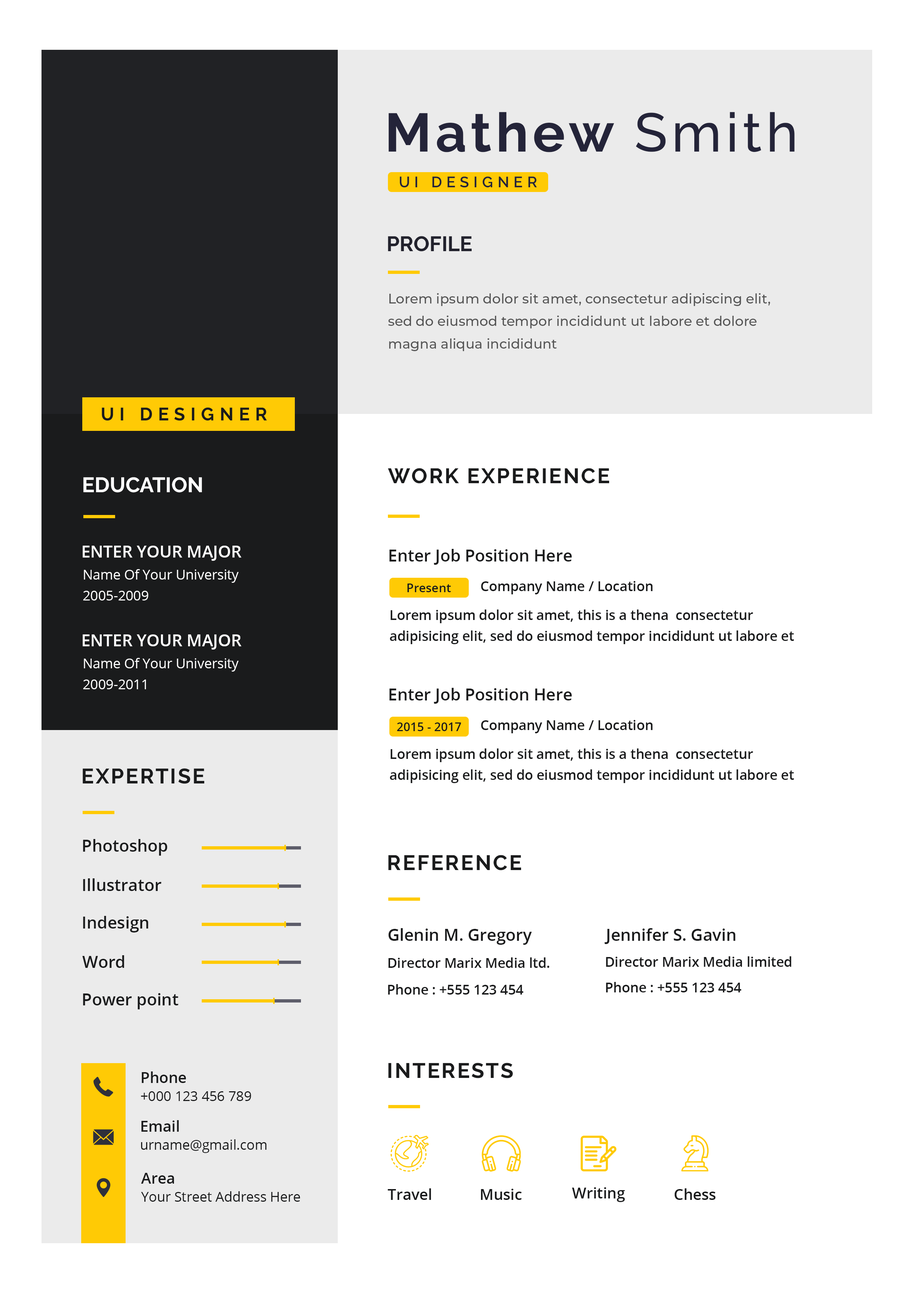
<style>
.page{position:relative;width:922px;height:1293px;background:#ffffff}
.page>*{position:absolute;margin:0}
.t1{font:54.1px "Raleway-Bold";letter-spacing:0.08em;color:#242439}
.t2{font:54.1px "Raleway-Medium";letter-spacing:0.08em;color:#242439}
.t3{font:15px "Raleway-SemiBold";letter-spacing:0.3em;color:#242439;text-transform:uppercase}
.t4{font:21.1px "Raleway-Bold";color:#22222d;text-transform:uppercase}
.t5{font:13.5px/22.6px "Montserrat-Medium";color:#555555}
.t6{font:18px "Raleway-Bold";letter-spacing:0.3em;color:#1a1b1c;text-transform:uppercase}
.t7{font:21.1px "Raleway-Bold";letter-spacing:0.08em;color:#1a1b1c;text-transform:uppercase}
.t8{font:21.1px "Raleway-Bold";color:#ffffff;text-transform:uppercase}
.t9{font:16.5px "OpenSans-Semibold";color:#ffffff;text-transform:uppercase}
.t10{font:16.5px "OpenSans-Semibold";color:#1a1b1c}
.t11{font:13.5px/21.1px "OpenSans";color:#ffffff}
.t12{font:13.5px "OpenSans-Semibold";color:#1a1b1c}
.t13{font:12px "OpenSans-Semibold";color:#1a1b1c}
.t14{font:13.5px/21.1px "OpenSans-Semibold";color:#1a1b1c}
.t15{font:13.5px/18px "OpenSans";color:#1a1b1c}
.t16{font:15px/18px "OpenSans-Semibold";color:#1a1b1c;text-transform:uppercase}
.t17{font:15px/18px "OpenSans-Semibold";color:#1a1b1c}
.t18{font:15px "OpenSans-Semibold";color:#1a1b1c}
</style>
<div class="page">
<p class="t1" style="left:389px;top:112px;width:406px;height:40px">Mathew <span class="t2">Smith</span></p>
<p class="t3" style="left:400px;top:176px;width:137px;height:12px">UI Designer</p>
<p class="t4" style="left:388px;top:236px;width:84px;height:16px">Profile</p>
<p class="t5" style="left:388px;top:293px;width:382px;height:58px">Lorem ipsum dolor sit amet, consectetur adipiscing elit, sed do eiusmod tempor incididunt ut labore et dolore magna aliqua incididunt</p>
<p class="t6" style="left:102px;top:407px;width:165px;height:14px">UI Designer</p>
<p class="t7" style="left:388px;top:468px;width:221px;height:16px">work experience</p>
<p class="t8" style="left:83px;top:477px;width:119px;height:16px">education</p>
<p class="t9" style="left:83px;top:546px;width:158px;height:15px">Enter your major</p>
<p class="t10" style="left:389px;top:549px;width:183px;height:16px">Enter Job Position Here</p>
<p class="t11" style="left:83px;top:569px;width:156px;height:32px">Name Of Your University<br>2005-2009</p>
<p class="t12" style="left:481px;top:581px;width:172px;height:13px">Company Name / Location</p>
<p class="t13" style="left:407px;top:584px;width:44px;height:8px">Present</p>
<p class="t14" style="left:390px;top:610px;width:404px;height:34px">Lorem ipsum dolor sit amet, this is a thena  consectetur adipisicing elit, sed do eiusmod tempor incididunt ut labore et dolore</p>
<p class="t9" style="left:83px;top:634px;width:158px;height:16px">Enter your major</p>
<p class="t11" style="left:83px;top:658px;width:156px;height:31px">Name Of Your University<br>2009-2011</p>
<p class="t10" style="left:389px;top:688px;width:183px;height:16px">Enter Job Position Here</p>
<p class="t13" style="left:397px;top:723px;width:64px;height:8px">2015 - 2017</p>
<p class="t12" style="left:481px;top:720px;width:172px;height:13px">Company Name / Location</p>
<p class="t14" style="left:390px;top:749px;width:404px;height:34px">Lorem ipsum dolor sit amet, this is a thena  consectetur adipisicing elit, sed do eiusmod tempor incididunt ut labore et dolore</p>
<p class="t7" style="left:83px;top:768px;width:121px;height:16px">expertise</p>
<p class="t10" style="left:83px;top:839px;width:84px;height:17px">Photoshop</p>
<p class="t7" style="left:388px;top:855px;width:133px;height:16px">reference</p>
<p class="t10" style="left:83px;top:878px;width:78px;height:13px">Illustrator</p>
<p class="t10" style="left:83px;top:916px;width:65px;height:17px">Indesign</p>
<p class="t10" style="left:388px;top:928px;width:144px;height:17px">Glenin M. Gregory</p>
<p class="t10" style="left:605px;top:928px;width:131px;height:16px">Jennifer S. Gavin</p>
<p class="t10" style="left:82px;top:955px;width:42px;height:13px">Word</p>
<p class="t12" style="left:388px;top:957px;width:161px;height:11px">Director Marix Media ltd.</p>
<p class="t12" style="left:606px;top:956px;width:185px;height:11px">Director Marix Media limited</p>
<p class="t12" style="left:388px;top:984px;width:135px;height:11px">Phone : +555 123 454</p>
<p class="t12" style="left:606px;top:982px;width:135px;height:11px">Phone : +555 123 454</p>
<p class="t10" style="left:83px;top:993px;width:95px;height:16px">Power point</p>
<p class="t15" style="left:141px;top:1072px;width:110px;height:29px"><span class="t16">P</span><span class="t17">hone<br></span>+000 123 456 789</p>
<p class="t7" style="left:388px;top:1063px;width:125px;height:15px">interests</p>
<p class="t15" style="left:141px;top:1120px;width:126px;height:33px"><span class="t16">e</span><span class="t17">mail<br></span>urname@gmail.com</p>
<p class="t15" style="left:141px;top:1173px;width:159px;height:29px"><span class="t16">a</span><span class="t17">rea<br></span>Your Street Address Here</p>
<p class="t18" style="left:388px;top:1188px;width:43px;height:12px">Travel</p>
<p class="t18" style="left:481px;top:1189px;width:41px;height:11px">Music</p>
<p class="t18" style="left:572px;top:1187px;width:53px;height:15px">Writing</p>
<p class="t18" style="left:675px;top:1188px;width:41px;height:12px">Chess</p>
</div>
